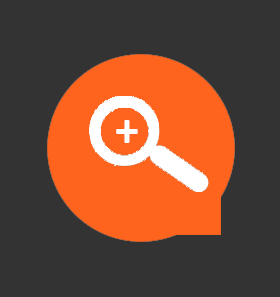
<style>
.page{position:relative;width:280px;height:297px;background:#333333}
.page>*{position:absolute;margin:0}
.t1{font:48px "Calibri-Bold";color:#ffffff}
</style>
<div class="page">
<p class="t1" style="left:116px;top:120px;width:22px;height:23px">+</p>
</div>
